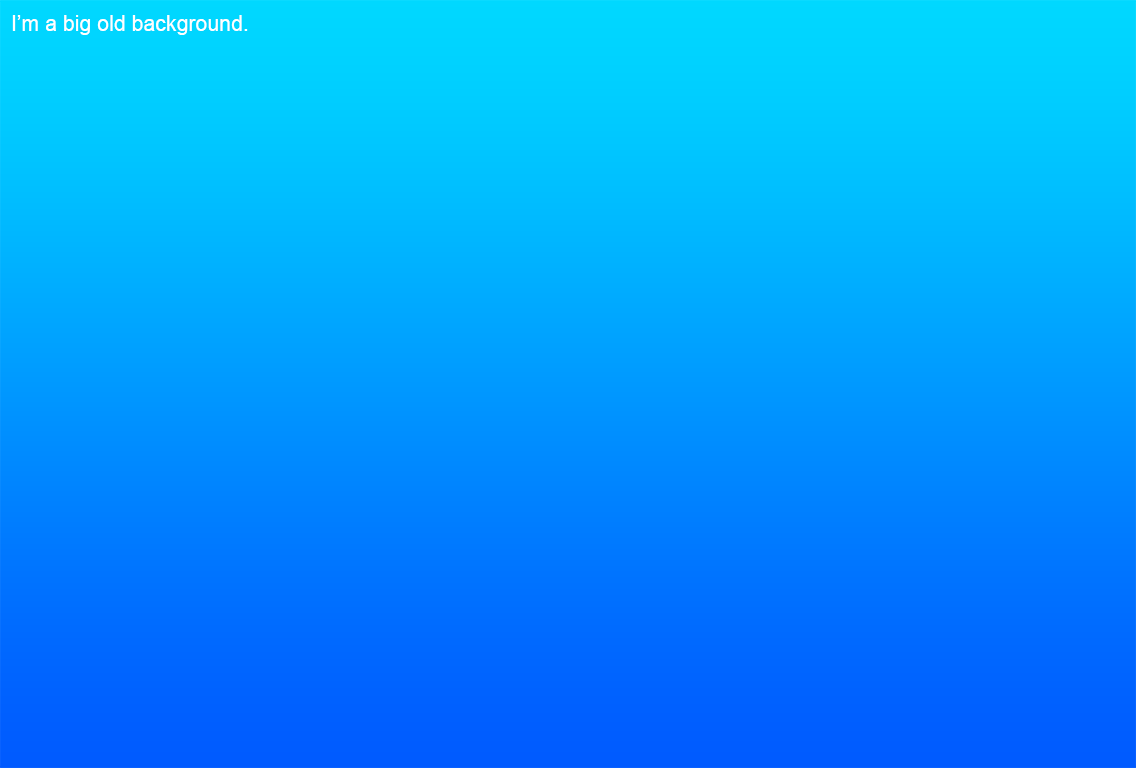
<style>
.page{position:relative;width:1136px;height:768px}
.page>*{position:absolute;margin:0}
.t1{font:21.6px "ArialMT";color:#ffffff}
</style>
<div class="page">
<p class="t1" style="left:12px;top:15px;width:236px;height:20px">I’m a big old background.</p>
</div>
